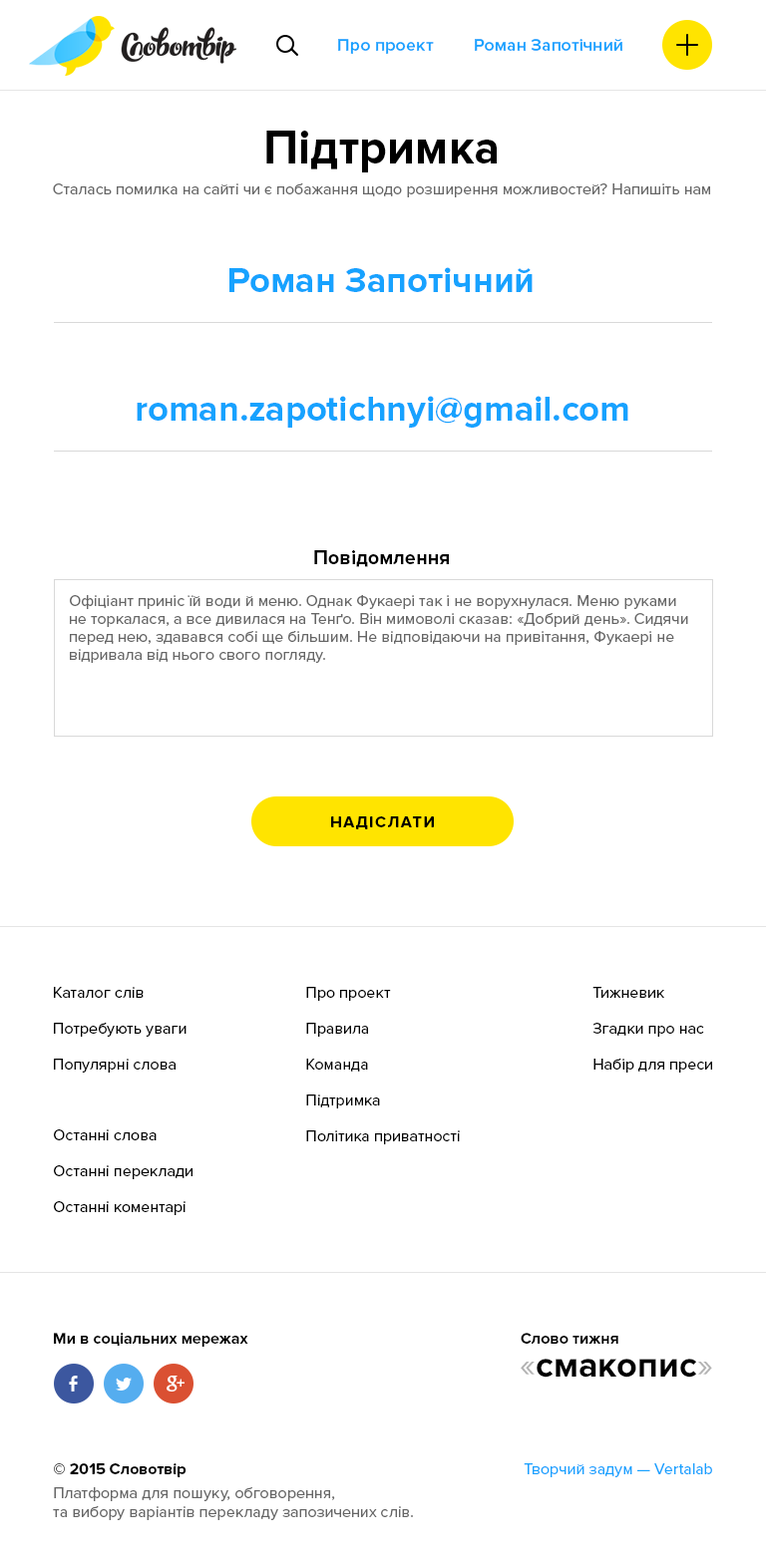
<style>
.page{position:relative;width:766px;height:1557px;background:#ffffff}
.page>*{position:absolute;margin:0}
.t1{font:17.9px "ProximaNova-Semibold";color:#17a2ff}
.t2{font:47.9px "ProximaNova-Bold";color:#000000}
.t3{font:16px "ProximaNova-Regular";color:#666666}
.t4{font:35.9px "ProximaNova-Bold";color:#17a2ff}
.t5{font:19.9px "ProximaNova-Bold";color:#000000}
.t6{font:15.9px/17.9px "ProximaNova-Regular";color:#666666}
.t7{font:16px "ProximaNova-Bold";letter-spacing:0.1em;color:#000000;text-transform:uppercase}
.t8{font:16px/35.9px "ProximaNova-Regular";color:#000000}
.t9{font:16px/35.9px "ProximaNova-Regular";color:#010101}
.t10{font:16px "ProximaNova-Bold";color:#010101}
.t11{font:35.9px "ProximaNova-Bold";color:#000000}
.t12{font:35.9px "ProximaNova-Regular";color:#b3b3b3}
.t13{font:16px/21.9px "ProximaNova-Bold";color:#000000}
.t14{font:16px/23.9px "ProximaNova-Regular";color:#666666}
.t15{font:16px "ProximaNova-Regular";color:#17a2ff}
</style>
<div class="page">
<p class="t1" style="left:338px;top:39px;width:96px;height:15px">Про проект</p>
<p class="t1" style="left:475px;top:39px;width:147px;height:12px">Роман Запотічний</p>
<p class="t2" style="left:266px;top:131px;width:231px;height:41px">Підтримка</p>
<p class="t3" style="left:53px;top:183px;width:657px;height:14px">Сталась помилка на сайті чи є побажання щодо розширення можливостей? Напишіть нам</p>
<p class="t4" style="left:229px;top:267px;width:303px;height:25px">Роман Запотічний</p>
<p class="t4" style="left:137px;top:396px;width:491px;height:32px">roman.zapotichnyi@gmail.com</p>
<p class="t5" style="left:314px;top:550px;width:135px;height:17px">Повідомлення</p>
<p class="t6" style="left:70px;top:595px;width:618px;height:68px">Офіціант приніс їй води й меню. Однак Фукаері так і не ворухнулася. Меню руками не торкалася, а все дивилася на Тенґо. Він мимоволі сказав: «Добрий день». Сидячи перед нею, здавався собі ще більшим. Не відповідаючи на привітання, Фукаері не відривала від нього свого погляду.</p>
<p class="t7" style="left:331px;top:817px;width:103px;height:13px">Надіслати</p>
<p class="t8" style="left:54px;top:987px;width:132px;height:86px">Каталог слів<br>Потребують уваги<br>Популярні слова</p>
<p class="t8" style="left:306px;top:987px;width:154px;height:158px">Про проект<br>Правила<br>Команда<br>Підтримка<br>Політика приватності</p>
<p class="t9" style="left:592px;top:987px;width:120px;height:86px">Тижневик<br>Згадки про нас<br>Набір для преси</p>
<p class="t8" style="left:54px;top:1130px;width:138px;height:85px">Останні слова<br>Останні переклади<br>Останні коментарі</p>
<p class="t10" style="left:54px;top:1333px;width:194px;height:14px">Ми в соціальних мережах</p>
<p class="t10" style="left:520px;top:1333px;width:98px;height:11px">Слово тижня</p>
<p class="t11" style="left:520px;top:1359px;width:192px;height:19px"><span class="t12">«</span>смакопис<span class="t12">»</span></p>
<p class="t3" style="left:53px;top:1464px;width:360px;height:56px"><span class="t13">© 2015 Словотвір<br></span><span class="t14">Платформа для пошуку, обговорення,<br></span>та вибору варіантів перекладу запозичених слів.</p>
<p class="t15" style="left:523px;top:1464px;width:189px;height:14px">Творчий задум — Vertalab</p>
</div>
